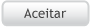
<style>
.page{position:relative;width:91px;height:27px}
.page>*{position:absolute;margin:0}
.t1{font:13px "TrebuchetMS";color:#444444}
</style>
<div class="page">
<p class="t1" style="left:24px;top:8px;width:43px;height:10px">Aceitar</p>
</div>
